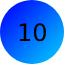
<style>
.page{position:relative;width:64px;height:64px}
.page>*{position:absolute;margin:0}
.t1{font:24px "DejaVuSans";color:#000000}
</style>
<div class="page">
<p class="t1" style="left:19px;top:23px;width:27px;height:19px">10</p>
</div>
